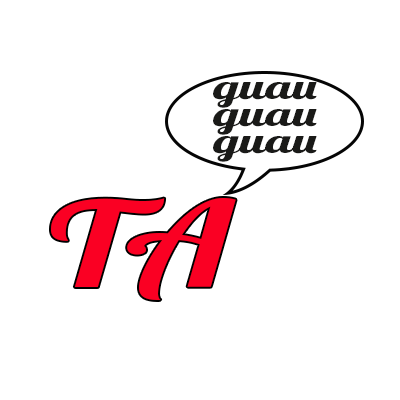
<style>
.page{position:relative;width:400px;height:400px;background:#ffffff}
.page>*{position:absolute;margin:0}
.t1{font:34.1px/27px "Lobster1.4";color:#1a1a18;scale:1.52 1}
.t2{font:118.2px "Lobster1.4";color:#fa0023;scale:1.34 1}
</style>
<div class="page">
<p class="t1" style="left:213px;top:82px;width:104px;height:80px;text-align:center">guau<br>guau<br>guau</p>
<p class="t2" style="left:51px;top:198px;width:185px;height:102px">TA</p>
</div>
